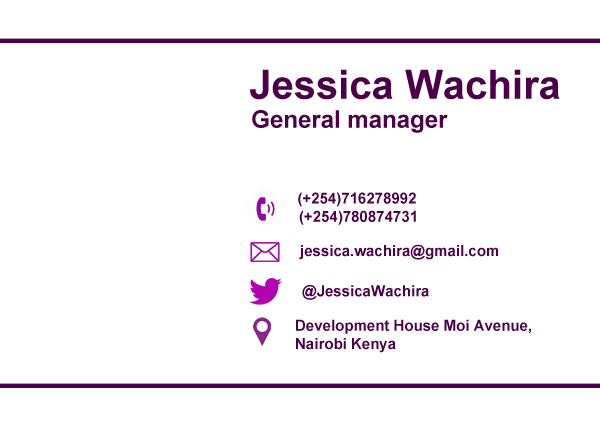
<style>
.page{position:relative;width:600px;height:430px;background:#ffffff}
.page>*{position:absolute;margin:0}
.t1{font:40.4px "Arial-BoldMT";color:#4b0049}
.t2{font:36.3px "BodoniMT-Bold";color:#522a86}
.t3{font:24.2px "Arial-BoldMT";color:#4b0049}
.t4{font:15.2px "Arial-BoldMT";color:#4b0049}
.t5{font:36.3px "BodoniMTBlack";color:#4b0049}
</style>
<div class="page">
<p class="t1" style="left:250px;top:69px;width:310px;height:64px"><span class="t2">  <br></span>  Jessica Wachira<br><span class="t3">   General manager</span></p>
<p class="t4" style="left:298px;top:192px;width:118px;height:33px"><span class="t5">   <br><br><br>     </span>(+254)716278992<br>       (+254)780874731</p>
<p class="t4" style="left:299px;top:244px;width:199px;height:16px">jessica.wachira@gmail.com</p>
<p class="t4" style="left:302px;top:285px;width:127px;height:15px">@JessicaWachira</p>
<p class="t4" style="left:296px;top:319px;width:235px;height:34px">Development House Moi Avenue,<br>Nairobi Kenya</p>
</div>
